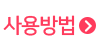
<style>
.page{position:relative;width:100px;height:50px;background:#ffffff}
.page>*{position:absolute;margin:0}
.t1{font:20.8px "NanumSquareB";letter-spacing:-0.04em;color:#ff3b5c}
</style>
<div class="page">
<p class="t1" style="left:3px;top:15px;width:72px;height:21px">사용방법</p>
</div>
